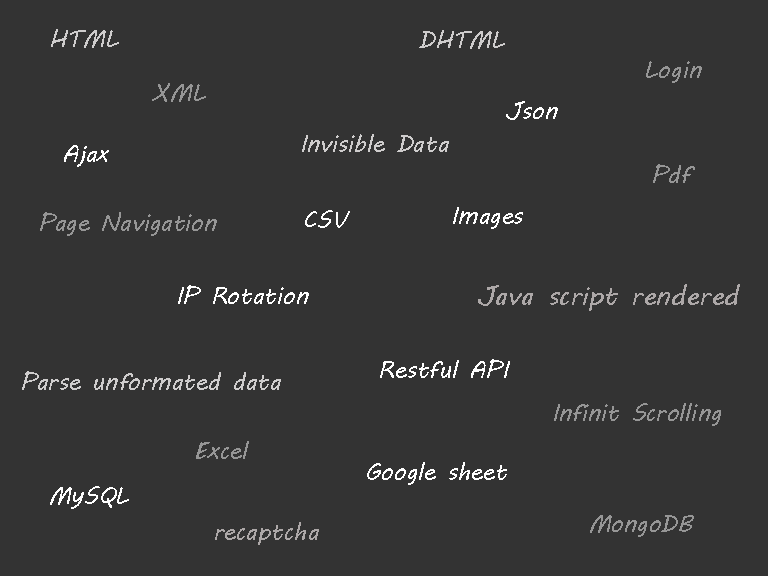
<style>
.page{position:relative;width:768px;height:576px;background:#333333}
.page>*{position:absolute;margin:0}
.t1{font:24px "MVBoli";color:#cfcdcd}
.t2{font:24px "MVBoli";color:#969696}
.t3{font:24px "MVBoli";color:#ffffff}
.t4{font:27px "MVBoli";color:#ada8a8}
.t5{font:24px "MVBoli";color:#ada8a8}
</style>
<div class="page">
<p class="t1" style="left:51px;top:29px;width:68px;height:19px">HTML</p>
<p class="t1" style="left:419px;top:30px;width:86px;height:19px">DHTML</p>
<p class="t2" style="left:646px;top:61px;width:56px;height:22px">Login</p>
<p class="t2" style="left:152px;top:83px;width:54px;height:19px">XML</p>
<p class="t3" style="left:506px;top:101px;width:52px;height:19px">Json</p>
<p class="t1" style="left:302px;top:134px;width:147px;height:18px">Invisible Data</p>
<p class="t3" style="left:64px;top:145px;width:45px;height:22px">Ajax</p>
<p class="t2" style="left:653px;top:164px;width:42px;height:19px">Pdf</p>
<p class="t3" style="left:453px;top:207px;width:70px;height:22px">Images</p>
<p class="t2" style="left:40px;top:212px;width:177px;height:24px">Page Navigation</p>
<p class="t3" style="left:305px;top:210px;width:45px;height:18px">CSV</p>
<p class="t3" style="left:178px;top:285px;width:131px;height:19px">IP Rotation</p>
<p class="t4" style="left:478px;top:284px;width:262px;height:27px">Java script rendered</p>
<p class="t3" style="left:380px;top:359px;width:130px;height:19px">Restful API</p>
<p class="t1" style="left:22px;top:371px;width:259px;height:19px">Parse unformated data</p>
<p class="t2" style="left:554px;top:403px;width:167px;height:23px">Infinit Scrolling</p>
<p class="t2" style="left:196px;top:441px;width:53px;height:18px">Excel</p>
<p class="t3" style="left:367px;top:462px;width:140px;height:23px">Google sheet</p>
<p class="t3" style="left:50px;top:486px;width:79px;height:23px">MySQL</p>
<p class="t2" style="left:590px;top:515px;width:104px;height:22px">MongoDB</p>
<p class="t5" style="left:215px;top:522px;width:104px;height:23px">recaptcha</p>
</div>
